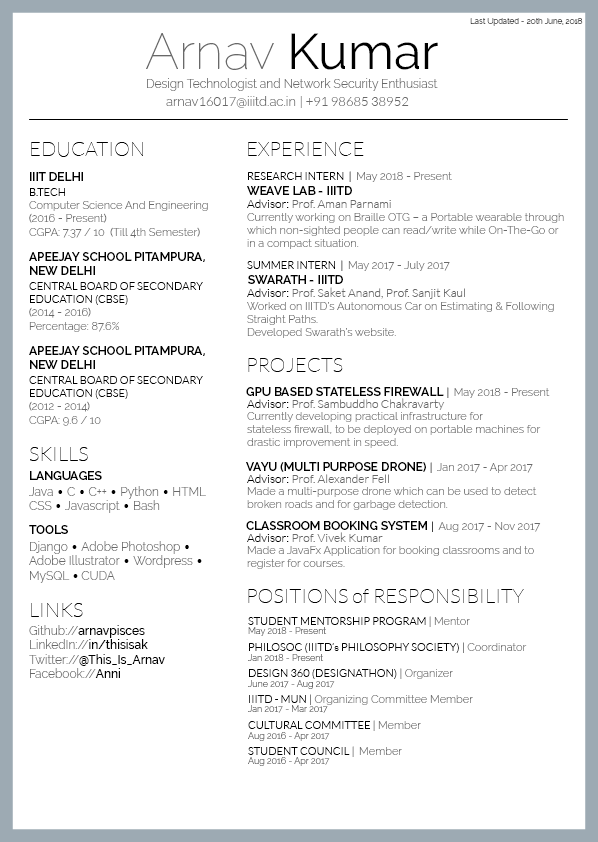
<style>
.page{position:relative;width:598px;height:842px;background:#ffffff}
.page>*{position:absolute;margin:0}
.t1{font:8px "Raleway-Thin"}
.t2{font:50px "Raleway-Thin";color:#696969}
.t3{font:50px "Raleway-Regular";color:#000000}
.t4{font:12px "Raleway-Light";color:#696969}
.t5{font:13px "Lato-Light";color:#696969}
.t6{font:13px "Raleway-Light";color:#696969}
.t7{font:20px "Lato-Hairline";color:#000000}
.t8{font:12px "Raleway-SemiBold";color:#000000}
.t9{font:11px "Lato-Light";color:#000000}
.t10{font:11px "Raleway-Light";color:#696969}
.t11{font:12px "Lato-Light";color:#696969}
.t12{font:12px "Lato-Light";color:#000000}
.t13{font:11px/13px "Lato-Light";color:#000000}
.t14{font:11px/13px "Lato-Light";color:#696969}
.t15{font:11px/13px "Raleway-Light";color:#696969}
.t16{font:12px "Raleway-Medium";color:#000000}
.t17{font:9px "Raleway-Light";color:#696969}
</style>
<div class="page">
<p class="t1" style="left:470px;top:18px;width:113px;height:8px">Last Updated - 20th June, 2018</p>
<p class="t2" style="left:146px;top:33px;width:292px;height:37px">Arnav <span class="t3">Kumar</span></p>
<p class="t4" style="left:147px;top:78px;width:291px;height:13px">Design Technologist and Network Security Enthusiast</p>
<p class="t5" style="left:166px;top:96px;width:243px;height:12px"><span class="t6">arnav</span>16017<span class="t6">@iiitd.ac.in </span>| +91 98685 38952</p>
<p class="t7" style="left:31px;top:142px;width:112px;height:15px">EDUCATION</p>
<p class="t7" style="left:248px;top:142px;width:116px;height:14px">EXPERIENCE</p>
<p class="t8" style="left:30px;top:172px;width:53px;height:9px">IIIT DELHI</p>
<p class="t9" style="left:248px;top:171px;width:204px;height:11px">RESEARCH INTERN  |  <span class="t10">May 2018 - Present</span></p>
<p class="t10" style="left:29px;top:188px;width:179px;height:50px"><span class="t9">B.TECH <br></span>Computer Science And Engineering (2016 - Present)<br>CGPA: 7.37 / 10  (Till 4th Semester)</p>
<p class="t8" style="left:247px;top:186px;width:105px;height:9px">WEAVE LAB - IIITD</p>
<p class="t11" style="left:247px;top:199px;width:144px;height:9px"><span class="t12">Advisor: </span>Prof. Aman Parnami</p>
<p class="t10" style="left:247px;top:213px;width:317px;height:36px">Currently working on Braille OTG – a Portable wearable through which non-sighted people can read/write while On-The-Go or in a compact situation.</p>
<p class="t8" style="left:29px;top:252px;width:176px;height:23px">APEEJAY SCHOOL PITAMPURA, NEW DELHI</p>
<p class="t10" style="left:247px;top:260px;width:203px;height:11px"><span class="t9">SUMMER INTERN  |  </span>May 2017 - July 2017</p>
<p class="t8" style="left:248px;top:275px;width:95px;height:9px">SWARATH - IIITD</p>
<p class="t9" style="left:29px;top:282px;width:174px;height:50px">CENTRAL BOARD OF SECONDARY EDUCATION (CBSE)<br><span class="t10">(2014 - 2016)<br>Percentage: 87.6%</span></p>
<p class="t11" style="left:247px;top:287px;width:218px;height:12px"><span class="t12">Advisor: </span>Prof. Saket Anand, Prof. Sanjit Kaul</p>
<p class="t10" style="left:247px;top:302px;width:307px;height:36px">Worked on IIITD’s Autonomous Car on Estimating &amp; Following Straight Paths. <br>Developed Swarath’s website.</p>
<p class="t8" style="left:29px;top:346px;width:176px;height:23px">APEEJAY SCHOOL PITAMPURA, NEW DELHI</p>
<p class="t7" style="left:248px;top:358px;width:95px;height:14px">PROJECTS</p>
<p class="t9" style="left:29px;top:376px;width:174px;height:50px">CENTRAL BOARD OF SECONDARY EDUCATION (CBSE)<br><span class="t10">(2012 - 2014)<br>CGPA: 9.6 / 10</span></p>
<p class="t8" style="left:246px;top:387px;width:304px;height:11px">GPU BASED STATELESS FIREWALL <span class="t9">|  </span><span class="t10">May 2018 - Present</span></p>
<p class="t11" style="left:247px;top:398px;width:198px;height:12px"><span class="t12">Advisor: </span>Prof. Sambuddho Chakravarty</p>
<p class="t10" style="left:247px;top:412px;width:294px;height:36px">Currently developing practical infrastructure for <br>stateless firewall, to be deployed on portable machines for drastic improvement in speed.</p>
<p class="t7" style="left:30px;top:447px;width:58px;height:14px">SKILLS</p>
<p class="t8" style="left:246px;top:462px;width:287px;height:11px">VAYU (MULTI PURPOSE DRONE) <span class="t9">|  </span><span class="t10">Jan 2017 - Apr 2017</span></p>
<p class="t8" style="left:30px;top:471px;width:72px;height:9px">LANGUAGES</p>
<p class="t4" style="left:29px;top:486px;width:177px;height:27px">Java <span class="t12">• </span>C <span class="t12">• </span>C++ <span class="t12">• </span>Python <span class="t12">• </span>HTML<br>CSS <span class="t12">• </span>Javascript <span class="t12">• </span>Bash</p>
<p class="t11" style="left:247px;top:474px;width:142px;height:9px"><span class="t12">Advisor: </span>Prof. Alexander Fell</p>
<p class="t10" style="left:247px;top:487px;width:290px;height:23px">Made a multi-purpose drone which can be used to detect broken roads and for garbage detection.</p>
<p class="t8" style="left:246px;top:521px;width:295px;height:11px">CLASSROOM BOOKING SYSTEM <span class="t9">|  </span><span class="t10">Aug 2017 - Nov 2017</span></p>
<p class="t8" style="left:29px;top:525px;width:39px;height:9px">TOOLS</p>
<p class="t11" style="left:247px;top:532px;width:136px;height:10px"><span class="t12">Advisor: </span>Prof. Vivek Kumar</p>
<p class="t4" style="left:29px;top:541px;width:173px;height:42px">Django <span class="t12">• </span>Adobe Photoshop <span class="t12">• </span>Adobe Illustrator <span class="t12">• </span>Wordpress <span class="t12">• </span>MySQL <span class="t12">• </span>CUDA<br>CSS3 <span class="t12">• </span>Javascript <span class="t12">• </span>Bash</p>
<p class="t10" style="left:247px;top:546px;width:287px;height:23px">Made a JavaFx Application for booking classrooms and to register for courses.</p>
<p class="t7" style="left:248px;top:589px;width:276px;height:14px">POSITIONS of RESPONSIBILITY</p>
<p class="t7" style="left:31px;top:603px;width:52px;height:14px">LINKS</p>
<p class="t13" style="left:248px;top:616px;width:279px;height:141px">STUDENT MENTORSHIP PROGRAM <span class="t14">| </span><span class="t15">Mentor<br><br></span>PHILOSOC (IIITD’s PHILOSOPHY SOCIETY) <span class="t14">| </span><span class="t15">Coordinator<br><br></span>DESIGN 360 (DESIGNATHON) <span class="t14">| </span><span class="t15">Organizer<br><br></span>IIITD - MUN <span class="t14">| </span><span class="t15">Organizing Committee Member<br><br></span>CULTURAL COMMITTEE <span class="t14">| </span><span class="t15">Member<br><br></span>STUDENT COUNCIL <span class="t14">|  </span><span class="t15">Member</span></p>
<p class="t16" style="left:29px;top:625px;width:136px;height:53px"><span class="t4">Github://</span>arnavpisces<br><span class="t4">LinkedIn://</span>in/thisisak<br><span class="t4">Twitter://</span>@This_Is_Arnav<br><span class="t4">Facebook://</span>Anni</p>
<p class="t17" style="left:248px;top:627px;width:79px;height:9px">May 2018 - Present</p>
<p class="t17" style="left:248px;top:654px;width:76px;height:7px">Jan 2018 - Present</p>
<p class="t17" style="left:248px;top:680px;width:87px;height:9px">June 2017 - Aug 2017</p>
<p class="t17" style="left:248px;top:705px;width:80px;height:8px">Jan 2017 - Mar 2017</p>
<p class="t17" style="left:248px;top:732px;width:82px;height:9px">Aug 2016 - Apr 2017</p>
<p class="t17" style="left:248px;top:757px;width:82px;height:9px">Aug 2016 - Apr 2017</p>
</div>
